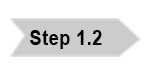
<style>
.page{position:relative;width:150px;height:76px;background:#ffffff}
.page>*{position:absolute;margin:0}
.t1{font:20px "Arial-BoldMT";letter-spacing:0.02em;color:#000000;scale:0.91 1}
</style>
<div class="page">
<p class="t1" style="left:30px;top:30px;width:72px;height:19px">Step 1.2</p>
</div>
